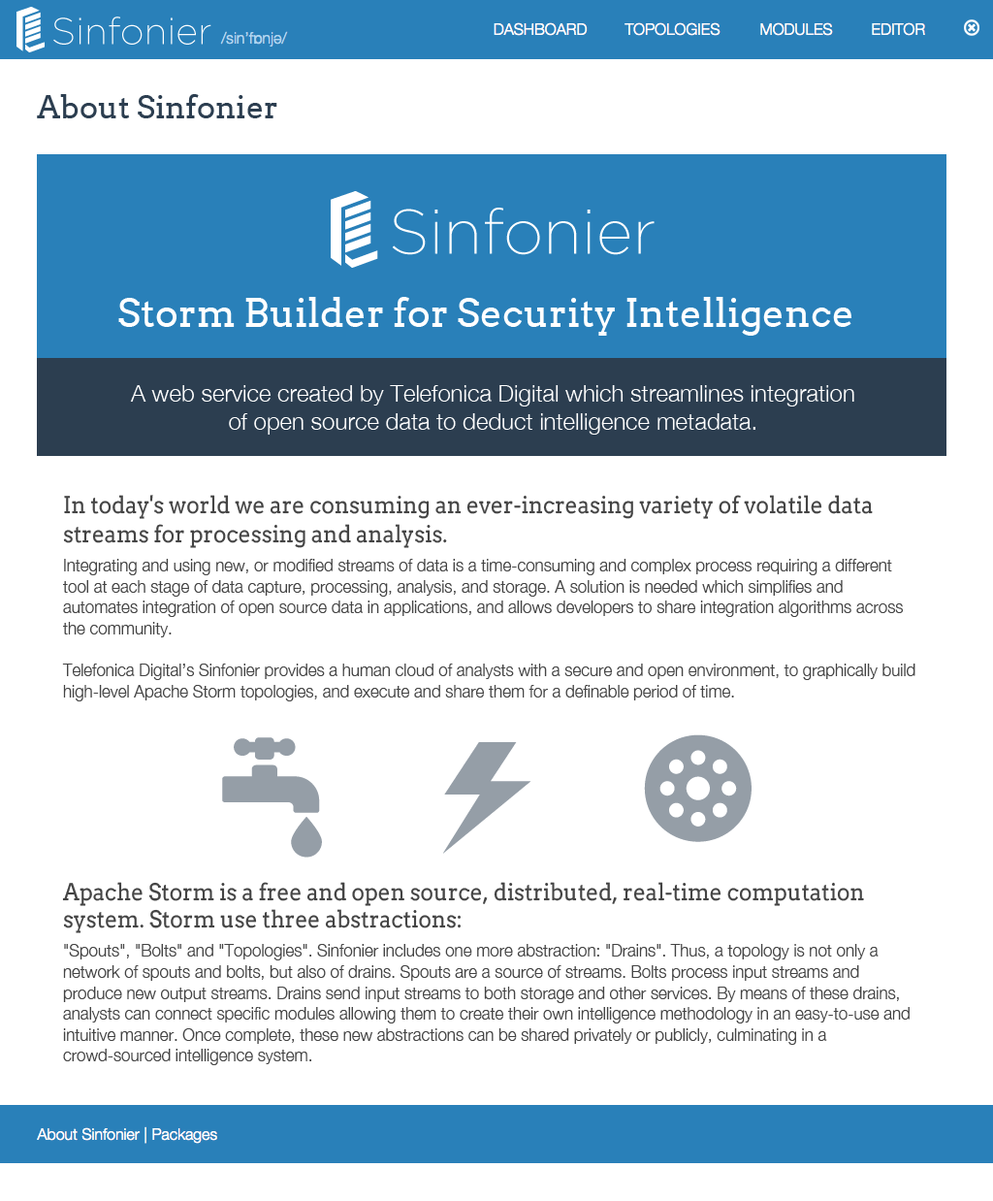
<style>
.page{position:relative;width:993px;height:1201px;background:#ffffff}
.page>*{position:absolute;margin:0}
.t1{font:31px "Arvo";color:#2c3e50}
.t2{font:38.8px "Arvo";color:#ffffff}
.t3{font:23.3px "HelveticaNeue-Light";color:#ffffff}
.t4{font:17.5px "HelveticaNeue-Light";color:#444444;scale:0.94 1}
.t5{font:23.3px/29.1px "Arvo";color:#444444;scale:0.94 1}
.t6{font:17.5px/29.1px "HelveticaNeue-Light";color:#444444;scale:0.94 1}
.t7{font:23.3px "Arvo";color:#444444;scale:0.94 1}
</style>
<div class="page">
<p class="t1" style="left:37px;top:94px;width:240px;height:24px">About Sinfonier</p>
<p class="t2" style="left:118px;top:297px;width:734px;height:39px">Storm Builder for Security Intelligence</p>
<p class="t3" style="left:130px;top:385px;width:724px;height:49px;text-align:center">A web service created by Telefonica Digital which streamlines integration of open source data to deduct intelligence metadata.</p>
<p class="t4" style="left:62px;top:495px;width:854px;height:570px"><span class="t5">In today's world we are consuming an ever-increasing variety of volatile data streams for processing and analysis. <br></span><span class="t6">Integrating and using new, or modified streams of data is a time-consuming and complex process requiring a different </span>tool at each stage of data capture, processing, analysis, and storage. A solution is needed which simplifies and automates integration of open source data in applications, and allows developers to share integration algorithms across the community.<br><br>Telefonica Digital’s Sinfonier provides a human cloud of analysts with a secure and open environment, to graphically build high-level Apache Storm topologies, and execute and share them for a definable period of time.<br><br><br><br><span class="t7"><br><br><br><br>Apache Storm is a free and open source, distributed, real-time computation system. Storm use three abstractions:  <br></span><span class="t6">"Spouts", "Bolts" and "Topologies". Sinfonier includes one more abstraction: "Drains". Thus, a topology is not only a </span>network of spouts and bolts, but also of drains. Spouts are a source of streams. Bolts process input streams and produce new output streams. Drains send input streams to both storage and other services. By means of these drains, analysts can connect specific modules allowing them to create their own intelligence methodology in an easy-to-use and intuitive manner. Once complete, these new abstractions can be shared privately or publicly, culminating in a crowd-sourced intelligence system.</p>
</div>
